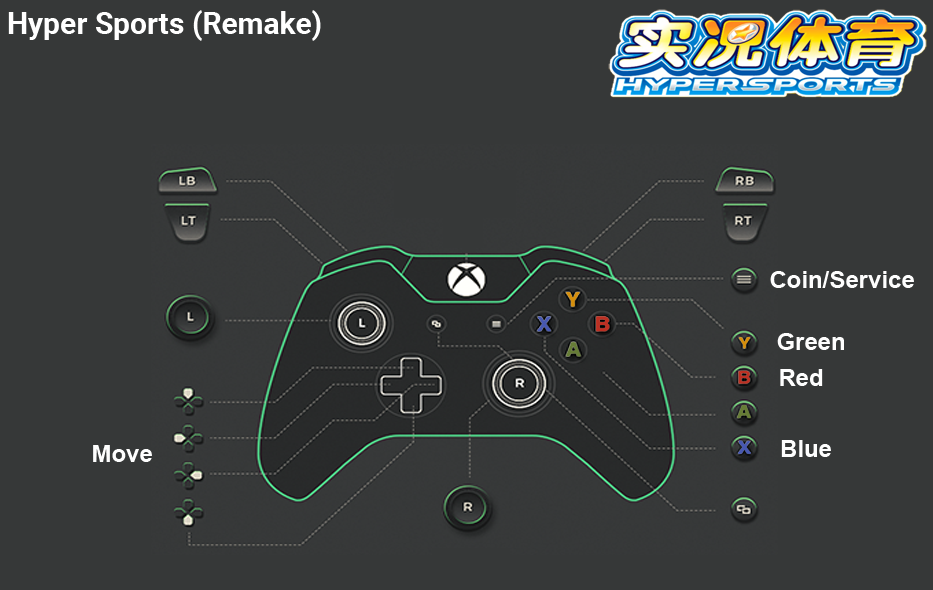
<style>
.page{position:relative;width:933px;height:590px;background:#363838}
.page>*{position:absolute;margin:0}
.t1{font:30px "Roboto-Bold";color:#ffffff}
.t2{font:24px "Arial-BoldMT";color:#fefefe}
</style>
<div class="page">
<p class="t1" style="left:8px;top:10px;width:313px;height:31px">Hyper Sports (Remake)</p>
<p class="t2" style="left:770px;top:271px;width:144px;height:17px">Coin/Service</p>
<p class="t2" style="left:777px;top:333px;width:67px;height:17px">Green</p>
<p class="t2" style="left:780px;top:369px;width:43px;height:17px">Red</p>
<p class="t2" style="left:93px;top:445px;width:59px;height:17px">Move</p>
<p class="t2" style="left:781px;top:440px;width:50px;height:17px">Blue</p>
</div>
